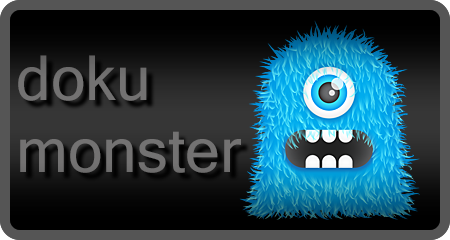
<style>
.page{position:relative;width:450px;height:240px}
.page>*{position:absolute;margin:0}
.t1{font:60px "Kartika";color:#737272}
</style>
<div class="page">
<p class="t1" style="left:18px;top:55px;width:223px;height:118px">doku<br>monster</p>
</div>
